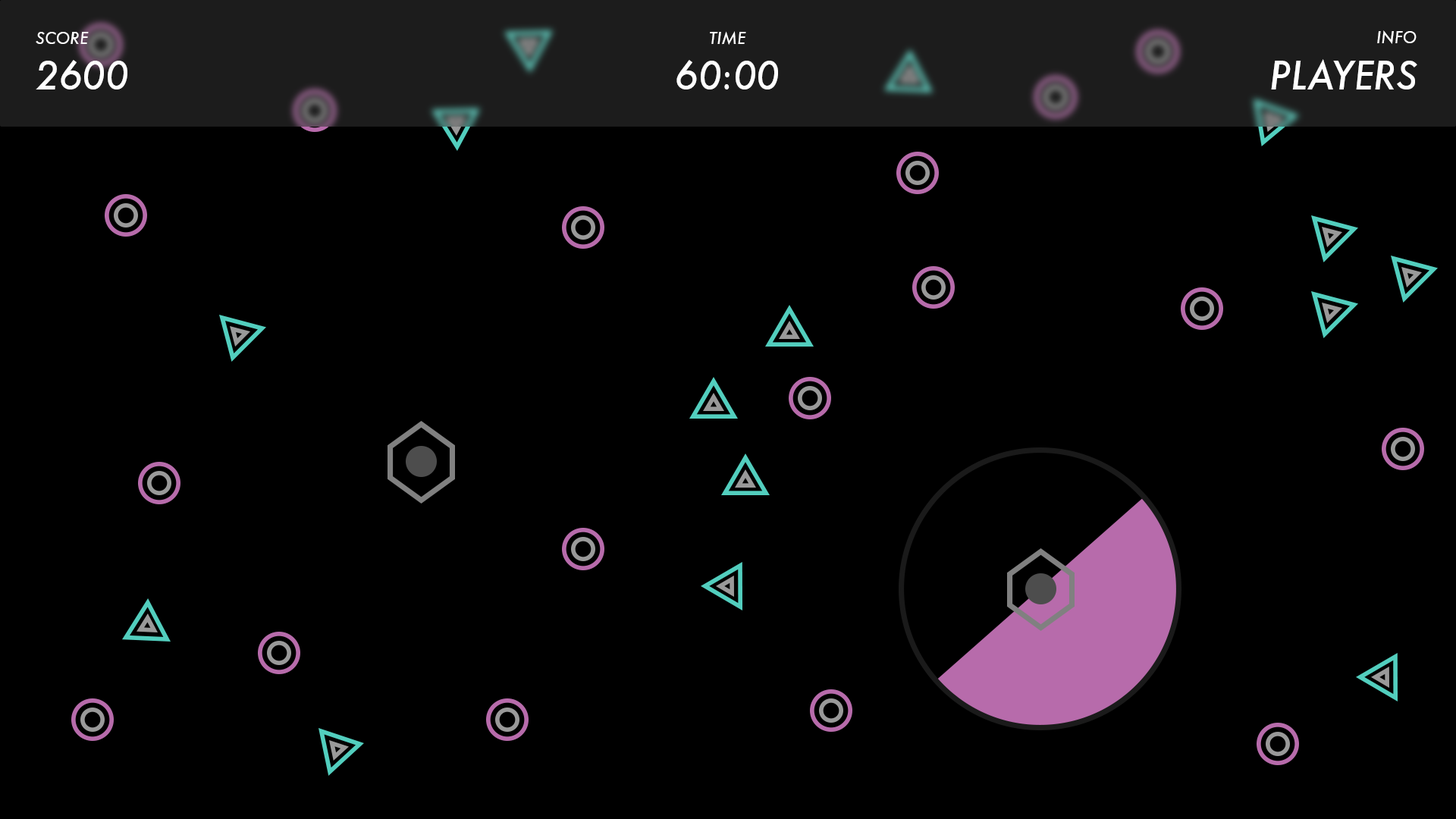
<style>
.page{position:relative;width:1456px;height:819px;background:#000000}
.page>*{position:absolute;margin:0}
.t1{font:16.1px "Futura-MediumItalic";color:#ffffff}
.t2{font:37.6px "Futura-MediumItalic";color:#ffffff}
</style>
<div class="page">
<p class="t1" style="left:36px;top:32px;width:53px;height:12px">SCORE</p>
<p class="t1" style="left:710px;top:31px;width:36px;height:14px">TIME</p>
<p class="t1" style="left:1377px;top:30px;width:40px;height:14px">INFO</p>
<p class="t2" style="left:36px;top:60px;width:91px;height:29px">2600</p>
<p class="t2" style="left:676px;top:60px;width:102px;height:29px">60:00</p>
<p class="t2" style="left:1271px;top:59px;width:146px;height:30px">PLAYERS</p>
</div>
